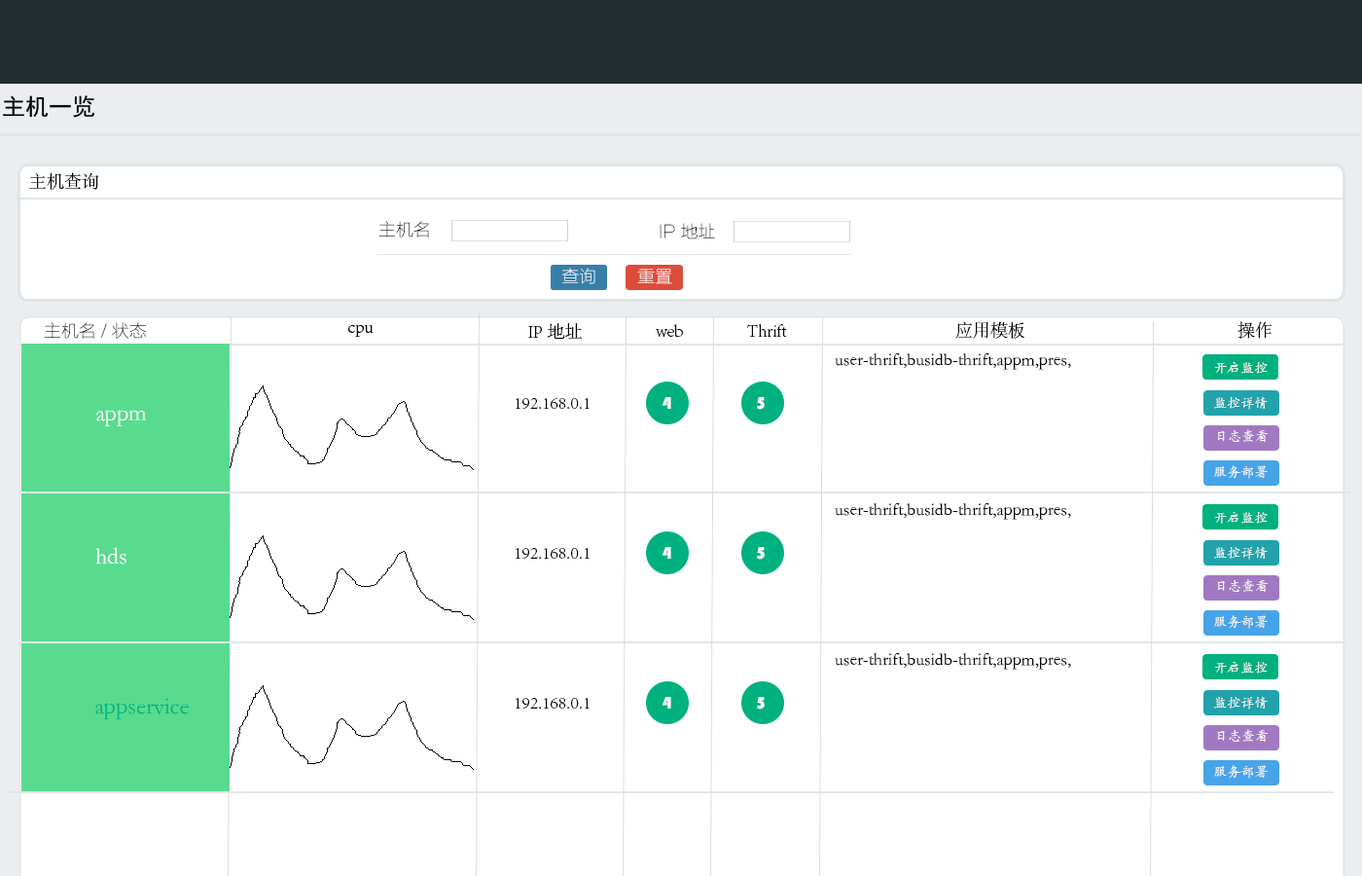
<style>
.page{position:relative;width:1362px;height:876px;background:#ffffff}
.page>*{position:absolute;margin:0}
.t1{font:17.5px "AdobeSongStd-Light";color:#000000}
.t2{font:17.5px "FZLTCXHJW--GB1-0";color:#000000}
.t3{font:17.5px "FZLTCXHJW--GB1-0";color:#ffffff}
.t4{font:17.5px "FZLTCXHJW--GB1-0"}
.t5{font:17.5px "STKaiti";color:#000000}
.t6{font:13.6px "STKaiti";color:#fefafa}
.t7{font:17.5px "STHupo";color:#ffffff}
.t8{font:23.3px "STKaiti";color:#fefafa}
.t9{font:23.3px "STKaiti";color:#00b17f}
</style>
<div class="page">
<p class="t1" style="left:29px;top:172px;width:70px;height:18px">主机查询</p>
<p class="t2" style="left:378px;top:221px;width:51px;height:16px">主机名</p>
<p class="t2" style="left:660px;top:223px;width:55px;height:16px">IP地址</p>
<p class="t3" style="left:561px;top:268px;width:34px;height:16px">查询</p>
<p class="t4" style="left:637px;top:268px;width:35px;height:16px">重置</p>
<p class="t2" style="left:44px;top:322px;width:103px;height:17px">主机名/状态</p>
<p class="t1" style="left:528px;top:323px;width:55px;height:16px">IP地址</p>
<p class="t1" style="left:656px;top:324px;width:27px;height:13px">web</p>
<p class="t1" style="left:747px;top:324px;width:40px;height:13px">Thrift</p>
<p class="t1" style="left:955px;top:321px;width:70px;height:18px">应用模板</p>
<p class="t1" style="left:1237px;top:321px;width:35px;height:18px">操作</p>
<p class="t5" style="left:835px;top:353px;width:236px;height:17px">user-thrift,busidb-thrift,appm,pres,</p>
<p class="t6" style="left:1214px;top:362px;width:54px;height:12px">开启监控</p>
<p class="t1" style="left:516px;top:398px;width:74px;height:11px">192.168.0.1</p>
<p class="t7" style="left:662px;top:397px;width:9px;height:12px">4</p>
<p class="t7" style="left:757px;top:397px;width:8px;height:13px">5</p>
<p class="t6" style="left:1214px;top:396px;width:54px;height:14px">监控详情</p>
<p class="t8" style="left:96px;top:410px;width:51px;height:16px">appm</p>
<p class="t6" style="left:1217px;top:429px;width:52px;height:13px">日志查看</p>
<p class="t6" style="left:1214px;top:465px;width:54px;height:14px">服务部署</p>
<p class="t5" style="left:835px;top:503px;width:236px;height:16px">user-thrift,busidb-thrift,appm,pres,</p>
<p class="t6" style="left:1214px;top:512px;width:54px;height:11px">开启监控</p>
<p class="t6" style="left:1214px;top:546px;width:54px;height:13px">监控详情</p>
<p class="t8" style="left:95px;top:547px;width:31px;height:17px">hds</p>
<p class="t1" style="left:516px;top:548px;width:74px;height:10px">192.168.0.1</p>
<p class="t7" style="left:662px;top:547px;width:9px;height:11px">4</p>
<p class="t7" style="left:757px;top:547px;width:8px;height:12px">5</p>
<p class="t6" style="left:1217px;top:579px;width:52px;height:12px">日志查看</p>
<p class="t6" style="left:1214px;top:615px;width:54px;height:13px">服务部署</p>
<p class="t5" style="left:835px;top:653px;width:236px;height:16px">user-thrift,busidb-thrift,appm,pres,</p>
<p class="t6" style="left:1214px;top:662px;width:54px;height:11px">开启监控</p>
<p class="t9" style="left:95px;top:698px;width:94px;height:21px">appservice</p>
<p class="t1" style="left:516px;top:698px;width:74px;height:10px">192.168.0.1</p>
<p class="t7" style="left:662px;top:697px;width:9px;height:11px">4</p>
<p class="t7" style="left:757px;top:697px;width:8px;height:12px">5</p>
<p class="t6" style="left:1214px;top:696px;width:54px;height:13px">监控详情</p>
<p class="t6" style="left:1217px;top:729px;width:52px;height:12px">日志查看</p>
<p class="t6" style="left:1214px;top:765px;width:54px;height:13px">服务部署</p>
</div>
